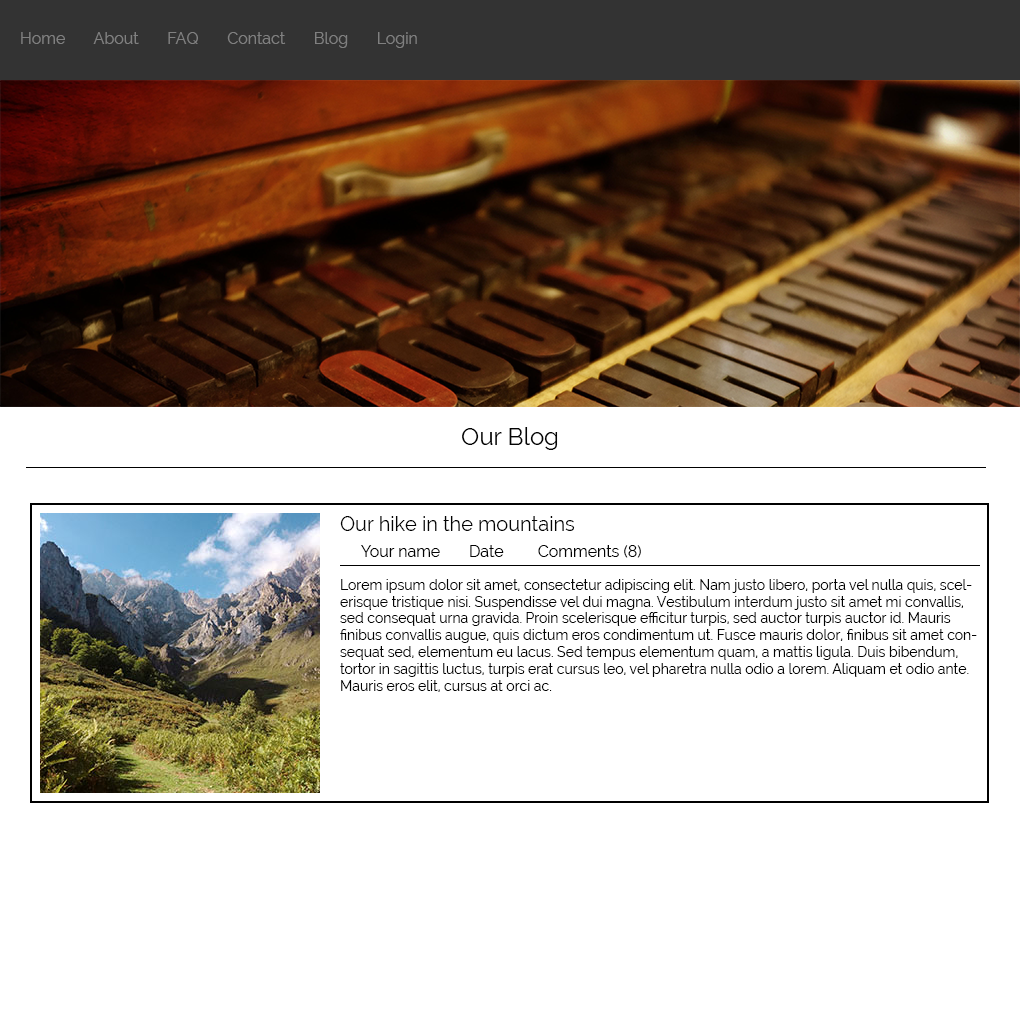
<style>
.page{position:relative;width:1020px;height:1020px;background:#ffffff}
.page>*{position:absolute;margin:0}
.t1{font:16px "Raleway";color:#808080}
.t2{font:24px "Raleway";color:#030303}
.t3{font:20px "Raleway";color:#030303}
.t4{font:16px "Raleway";color:#030303}
.t5{font:14px "Raleway";color:#030303}
</style>
<div class="page">
<p class="t1" style="left:21px;top:32px;width:396px;height:16px">Home       About       FAQ       Contact       Blog       Login</p>
<p class="t2" style="left:462px;top:427px;width:96px;height:23px">Our Blog</p>
<p class="t3" style="left:340px;top:516px;width:235px;height:15px">Our hike in the mountains</p>
<p class="t4" style="left:361px;top:545px;width:79px;height:12px">Your name</p>
<p class="t4" style="left:470px;top:545px;width:34px;height:12px">Date</p>
<p class="t4" style="left:538px;top:545px;width:103px;height:13px">Comments (8)</p>
<p class="t5" style="left:340px;top:579px;width:637px;height:113px">Lorem ipsum dolor sit amet, consectetur adipiscing elit. Nam justo libero, porta vel nulla quis, scelerisque tristique nisi. Suspendisse vel dui magna. Vestibulum interdum justo sit amet mi convallis, sed consequat urna gravida. Proin scelerisque efficitur turpis, sed auctor turpis auctor id. Mauris finibus convallis augue, quis dictum eros condimentum ut. Fusce mauris dolor, finibus sit amet consequat sed, elementum eu lacus. Sed tempus elementum quam, a mattis ligula. Duis bibendum, tortor in sagittis luctus, turpis erat cursus leo, vel pharetra nulla odio a lorem. Aliquam et odio ante. Mauris eros elit, cursus at orci ac.</p>
</div>
